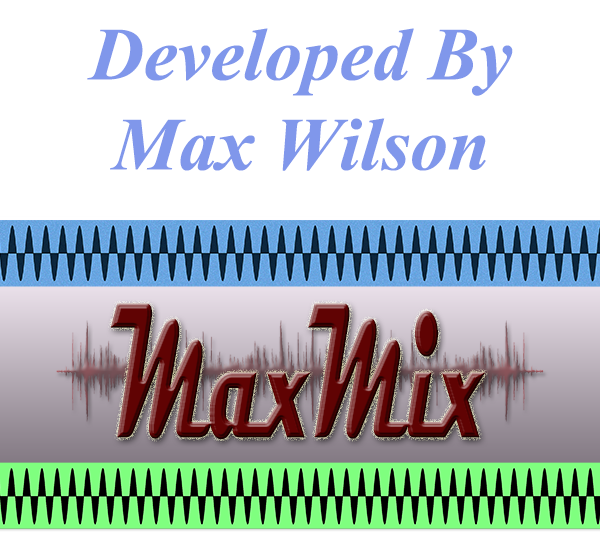
<style>
.page{position:relative;width:600px;height:540px;background:#ffffff}
.page>*{position:absolute;margin:0}
.t1{font:75px "MaestroTimes-BoldItalic";color:#8097eb}
.t2{font:194.7px "Magneto-Bold";scale:0.45 1}
</style>
<div class="page">
<p class="t1" style="left:87px;top:28px;width:426px;height:143px;text-align:center">Developed By<br>Max Wilson</p>
<p class="t2" style="left:110px;top:303px;width:376px;height:137px">MaxMix</p>
</div>
